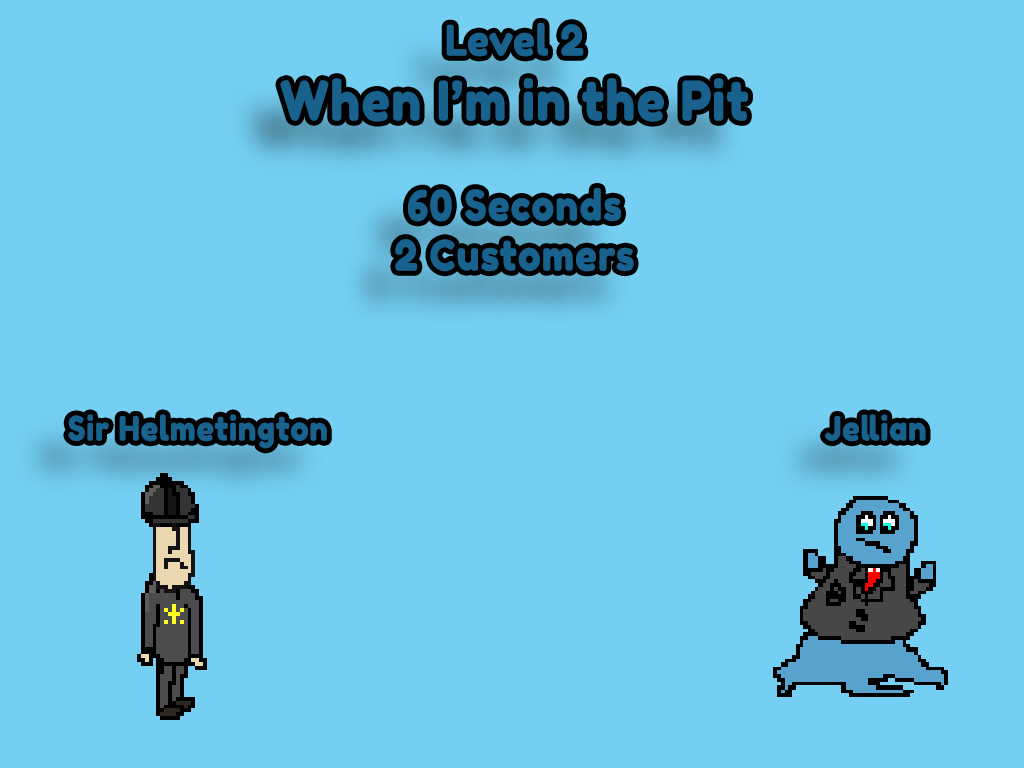
<style>
.page{position:relative;width:1024px;height:768px;background:#74cff3}
.page>*{position:absolute;margin:0}
.t1{font:33.3px "FredokaOne-Regular";letter-spacing:0.01em;color:#18628d;font-weight:bold;scale:0.9 1}
.t2{font:41.7px "FredokaOne-Regular";letter-spacing:0.01em;color:#18628d;font-weight:bold;scale:0.9 1}
.t3{font:54.2px "FredokaOne-Regular";letter-spacing:0.01em;color:#18628d;font-weight:bold;scale:0.9 1}
</style>
<div class="page">
<p class="t1" style="left:68px;top:23px;width:858px;height:426px;text-align:center"><span class="t2">Level 2<br></span><span class="t3">When I’m in the Pit<br></span><span class="t2"><br>60 Seconds<br>2 Customers<br><br></span><br><br>Sir Helmetington                                                         Jellian</p>
</div>
